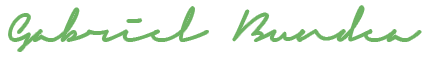
<style>
.page{position:relative;width:430px;height:60px;background:#ffffff}
.page>*{position:absolute;margin:0}
.t1{font:34px "SignericaFat";color:#6db363}
</style>
<div class="page">
<p class="t1" style="left:9px;top:6px;width:412px;height:45px">Gabriel Bundea</p>
</div>
